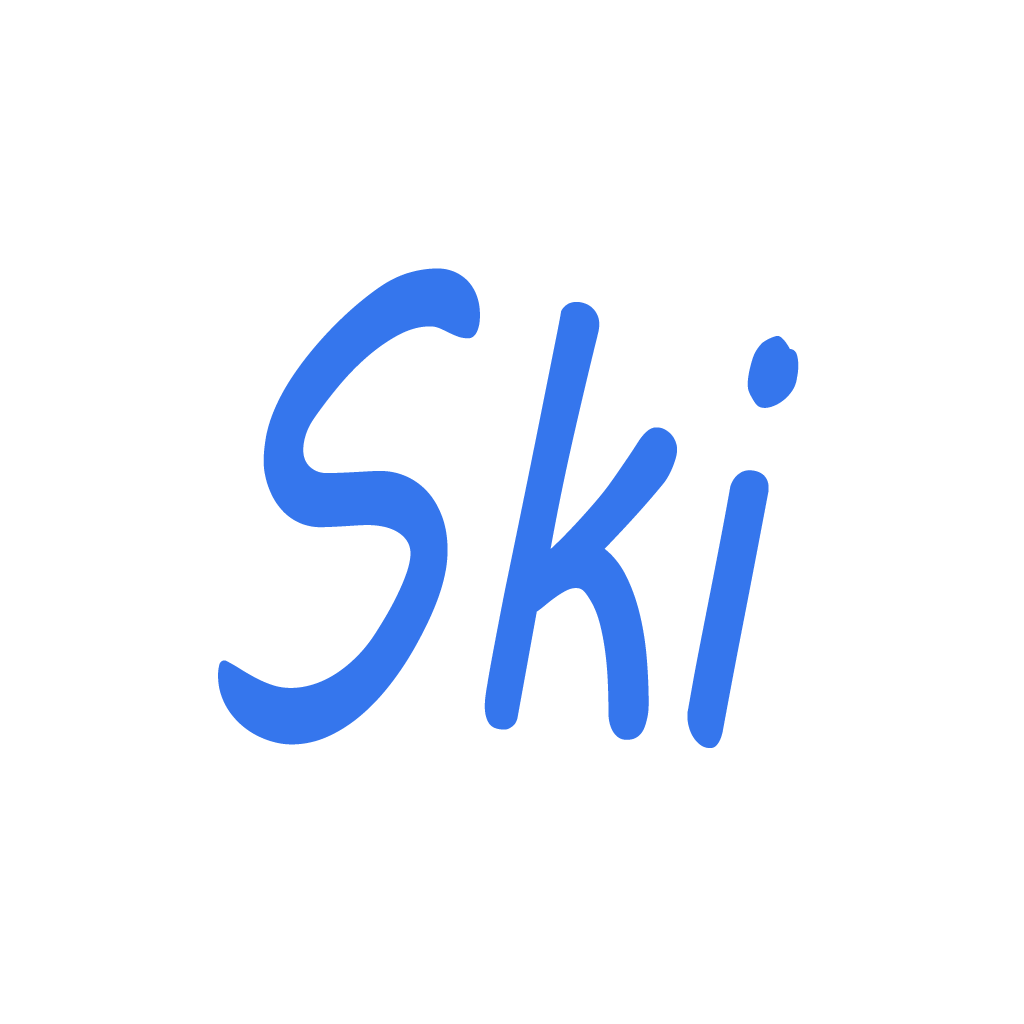
<style>
.page{position:relative;width:1024px;height:1024px;background:#ffffff}
.page>*{position:absolute;margin:0}
.t1{font:600px "MVBoli";color:#3576ed;scale:0.72 1}
</style>
<div class="page">
<p class="t1" style="left:218px;top:268px;width:581px;height:480px">Ski</p>
</div>
